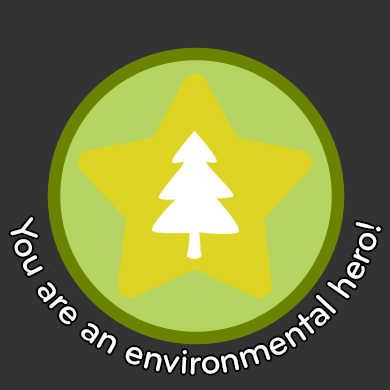
<style>
.page{position:relative;width:390px;height:390px;background:#333333}
.page>*{position:absolute;margin:0}
.t1{font:37.5px "Bryant-Medium";color:#ffffff}
</style>
<div class="page">
<p class="t1" style="left:10px;top:217px;width:371px;height:158px;text-align:center">You are an environmental hero!</p>
</div>
